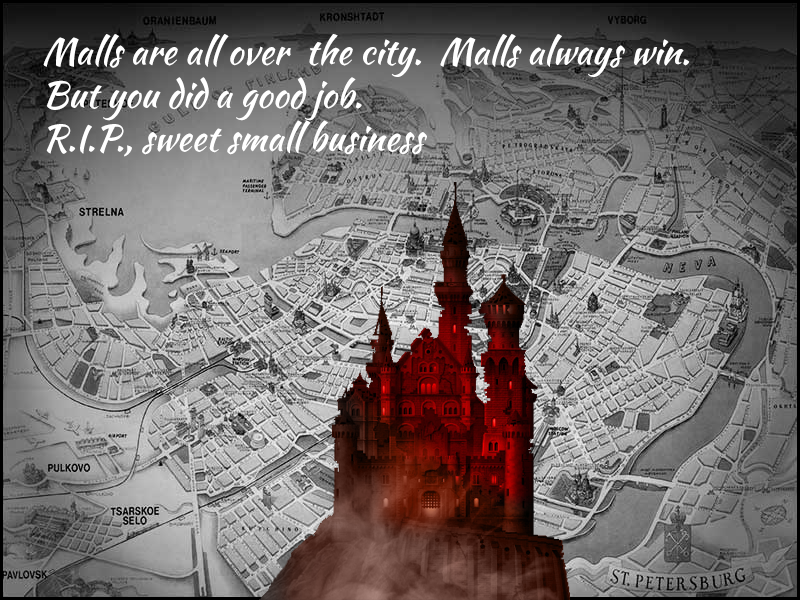
<style>
.page{position:relative;width:800px;height:600px}
.page>*{position:absolute;margin:0}
.t1{font:36px "KaushanScript-Regular";color:#ffffff}
</style>
<div class="page">
<p class="t1" style="left:43px;top:34px;width:647px;height:123px">Malls are all over  the city.  Malls always win. <br>But you did a good job.<br>R.I.P., sweet small business</p>
</div>
